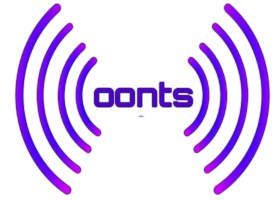
<style>
.page{position:relative;width:278px;height:200px;background:#ffffff}
.page>*{position:absolute;margin:0}
.t1{font:32.1px "Orbitron-Bold";color:#4b00c6}
</style>
<div class="page">
<p class="t1" style="left:94px;top:82px;width:99px;height:25px">oonts</p>
</div>
